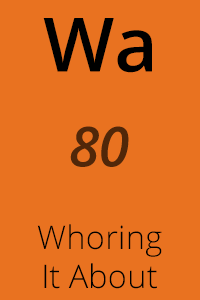
<style>
.page{position:relative;width:200px;height:300px;background:#e97220}
.page>*{position:absolute;margin:0}
.t1{font:75px "OpenSans-Semibold";color:#000000}
.t2{font:55.2px "OpenSans-SemiboldItalic";color:#512709}
.t3{font:32.5px "OpenSans-Light";color:#000000}
</style>
<div class="page">
<p class="t1" style="left:43px;top:18px;width:109px;height:55px">Wa</p>
<p class="t2" style="left:70px;top:126px;width:59px;height:41px">80</p>
<p class="t3" style="left:37px;top:224px;width:125px;height:65px;text-align:center">Whoring<br>It About</p>
</div>
